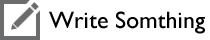
<style>
.page{position:relative;width:210px;height:40px;background:#ffffff}
.page>*{position:absolute;margin:0}
.t1{font:24px "GillSans";color:#000000}
</style>
<div class="page">
<p class="t1" style="left:49px;top:11px;width:156px;height:23px">Write Somthing</p>
</div>
